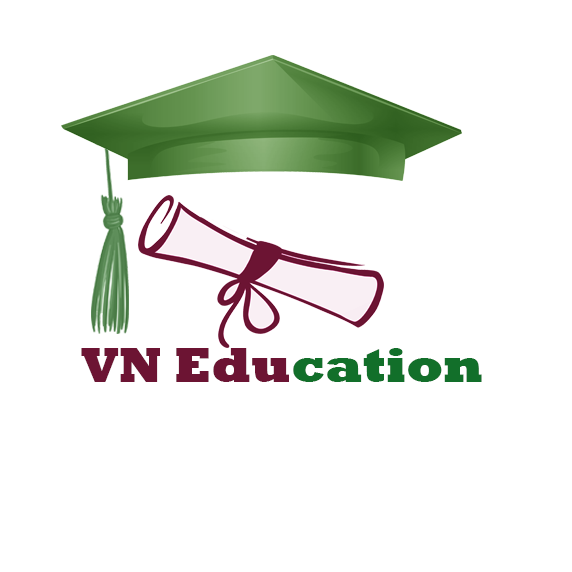
<style>
.page{position:relative;width:572px;height:572px;background:#ffffff}
.page>*{position:absolute;margin:0}
.t1{font:50px "Rockwell-ExtraBold";color:#6c1433}
.t2{font:50px "Rockwell-ExtraBold";color:#126f2a}
</style>
<div class="page">
<p class="t1" style="left:81px;top:348px;width:401px;height:34px">VN Edu<span class="t2">cation</span></p>
</div>
